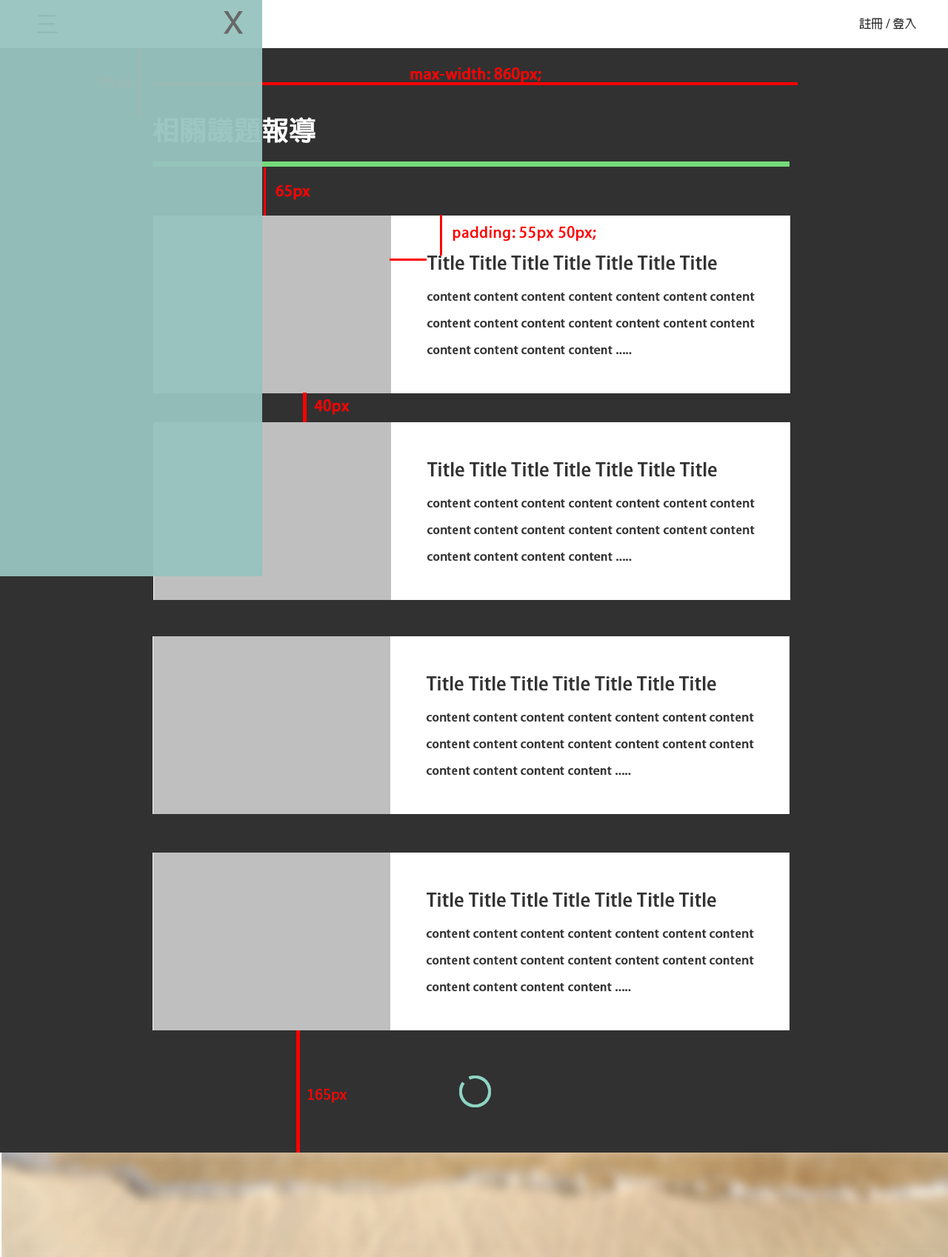
<style>
.page{position:relative;width:948px;height:1257px;background:#313131}
.page>*{position:absolute;margin:0}
.t1{font:22.2px "AdobeFanHeitiStd-Bold";color:#92bbb7}
.t2{font:29.6px "LetterGothicStd";color:#686868;font-weight:bold;scale:1.52 1}
.t3{font:11.9px "AdobeFanHeitiStd-Bold";color:#333333}
.t4{font:14.8px "AdobeFanHeitiStd-Bold";color:#9cb9b4;font-weight:bold}
.t5{font:14.8px "AdobeFanHeitiStd-Bold";color:#ff0000;font-weight:bold}
.t6{font:26.7px "AdobeFanHeitiStd-Bold";font-weight:bold}
.t7{font:17.8px "AdobeFanHeitiStd-Bold";color:#333333;font-weight:bold}
.t8{font:11.9px/26.7px "AdobeFanHeitiStd-Bold";color:#333333;font-weight:bold}
.t9{font:13.3px "MicrosoftJhengHeiRegular";color:#ff0000;font-weight:bold}
</style>
<div class="page">
<p class="t1" style="left:37px;top:15px;width:20px;height:18px">三</p>
<p class="t2" style="left:224px;top:11px;width:19px;height:23px">X</p>
<p class="t3" style="left:859px;top:18px;width:58px;height:12px">註冊 / 登入</p>
<p class="t4" style="left:99px;top:76px;width:34px;height:15px">95px</p>
<p class="t5" style="left:410px;top:67px;width:132px;height:16px">max-width: 860px;</p>
<p class="t6" style="left:153px;top:117px;width:163px;height:26px">相關議題報導</p>
<p class="t5" style="left:276px;top:185px;width:34px;height:15px">65px</p>
<p class="t5" style="left:453px;top:226px;width:143px;height:16px">padding: 55px 50px;</p>
<p class="t7" style="left:428px;top:255px;width:289px;height:15px">Title Title Title Title Title Title Title</p>
<p class="t8" style="left:427px;top:292px;width:328px;height:63px">content content content content content content content  <br>content content content content content content content <br>content content content content .....</p>
<p class="t5" style="left:314px;top:399px;width:36px;height:16px">40px</p>
<p class="t7" style="left:428px;top:462px;width:289px;height:15px">Title Title Title Title Title Title Title</p>
<p class="t8" style="left:427px;top:499px;width:328px;height:63px">content content content content content content content  <br>content content content content content content content <br>content content content content .....</p>
<p class="t7" style="left:427px;top:676px;width:289px;height:15px">Title Title Title Title Title Title Title</p>
<p class="t8" style="left:426px;top:713px;width:328px;height:63px">content content content content content content content  <br>content content content content content content content <br>content content content content .....</p>
<p class="t7" style="left:427px;top:892px;width:289px;height:16px">Title Title Title Title Title Title Title</p>
<p class="t8" style="left:426px;top:929px;width:328px;height:63px">content content content content content content content  <br>content content content content content content content <br>content content content content .....</p>
<p class="t9" style="left:307px;top:1089px;width:40px;height:14px">165px</p>
</div>
